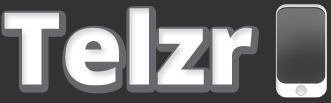
<style>
.page{position:relative;width:331px;height:103px;background:#333333}
.page>*{position:absolute;margin:0}
.t1{font:100px "OpenSans-Extrabold";color:#ffffff}
</style>
<div class="page">
<p class="t1" style="left:4px;top:8px;width:248px;height:78px">Telzr</p>
</div>
